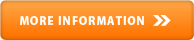
<style>
.page{position:relative;width:194px;height:40px}
.page>*{position:absolute;margin:0}
.t1{font:11.2px "KozGoPr6N-Heavy";letter-spacing:0.1em;color:#ffffff;text-transform:uppercase}
</style>
<div class="page">
<p class="t1" style="left:20px;top:16px;width:124px;height:9px">More Information</p>
</div>
